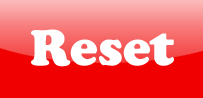
<style>
.page{position:relative;width:203px;height:98px;background:#f00000}
.page>*{position:absolute;margin:0}
.t1{font:52.3px "CooperBlack";color:#ffffff}
</style>
<div class="page">
<p class="t1" style="left:31px;top:29px;width:143px;height:38px">Reset</p>
</div>
